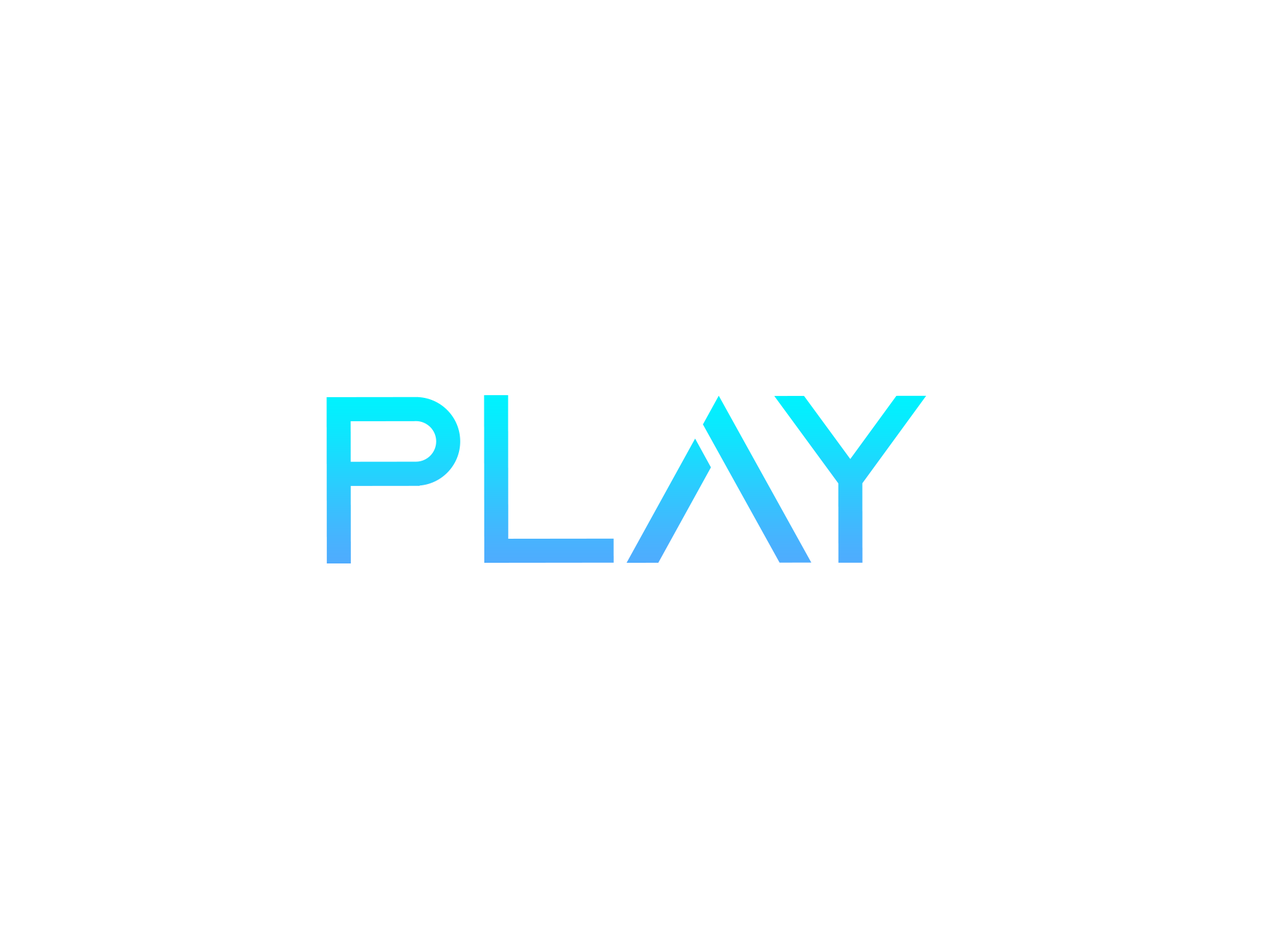
<style>
.page{position:relative;width:1261px;height:946px;background:#ffffff}
.page>*{position:absolute;margin:0}
.t1{font:250.2px "AquireRegular"}
</style>
<div class="page">
<p class="t1" style="left:326px;top:394px;width:601px;height:169px">PLAY</p>
</div>
